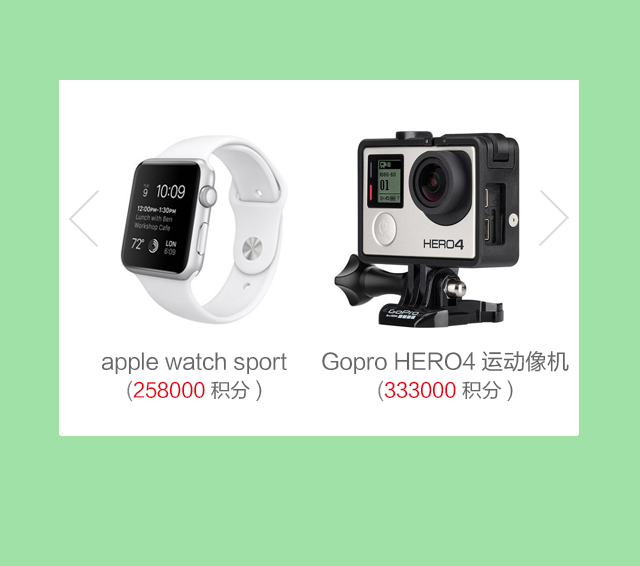
<style>
.page{position:relative;width:640px;height:566px;background:#a0e1a7}
.page>*{position:absolute;margin:0}
.t1{font:22px "FZLTHK--GBK1-0";color:#656565}
.t2{font:20px "FZLTHK--GBK1-0"}
.t3{font:20px "FZLTHK--GBK1-0";color:#e60012}
.t4{font:20px "FZLTHK--GBK1-0";color:#7e7e7e}
.t5{font:20px "FZLTHK--GBK1-0";color:#656565}
</style>
<div class="page">
<p class="t1" style="left:101px;top:352px;width:186px;height:23px">apple watch sport</p>
<p class="t1" style="left:322px;top:351px;width:247px;height:24px">Gopro HERO4运动像机</p>
<p class="t2" style="left:127px;top:380px;width:124px;height:22px">(89000 积分)</p>
<p class="t3" style="left:127px;top:380px;width:135px;height:22px"><span class="t4">(</span>258000<span class="t5">积分)</span></p>
<p class="t2" style="left:138px;top:380px;width:123px;height:22px">(55000 积分)</p>
<p class="t2" style="left:354px;top:380px;width:136px;height:22px">(113000 积分)</p>
<p class="t3" style="left:378px;top:380px;width:135px;height:22px"><span class="t4">(</span>333000<span class="t5"> 积分)</span></p>
</div>
